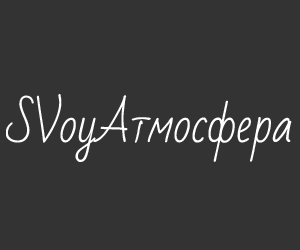
<style>
.page{position:relative;width:300px;height:250px;background:#333333}
.page>*{position:absolute;margin:0}
.t1{font:48px "BadScript-Regular";color:#ffffff}
</style>
<div class="page">
<p class="t1" style="left:6px;top:94px;width:286px;height:68px">SVoyАтмосфера</p>
</div>
